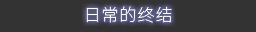
<style>
.page{position:relative;width:256px;height:32px;background:#333333}
.page>*{position:absolute;margin:0}
.t1{font:17px "NotoSansSC-Thin";letter-spacing:0.06em;color:#ffffff}
</style>
<div class="page">
<p class="t1" style="left:86px;top:6px;width:86px;height:17px">日常的终结</p>
</div>
